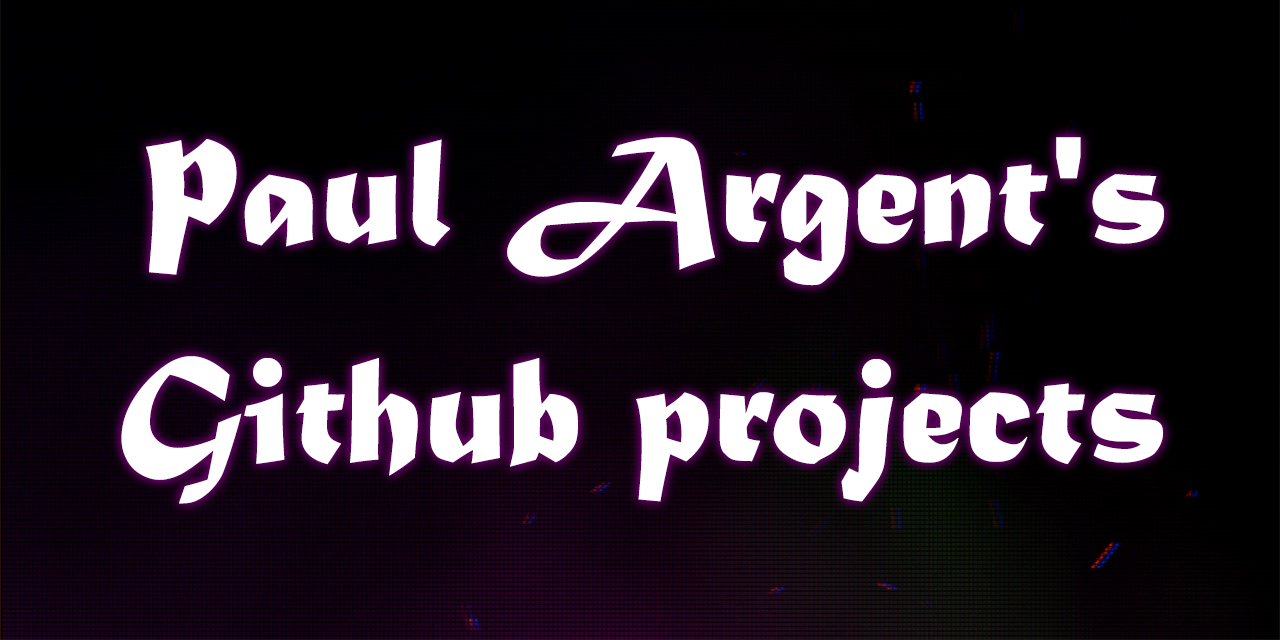
<style>
.page{position:relative;width:1280px;height:640px;background:#000000}
.page>*{position:absolute;margin:0}
.t1{font:160px "MaturaMTScriptCapitals";color:#ffffff}
.t2{font:200px "MaturaMTScriptCapitals";color:#ffffff}
</style>
<div class="page">
<p class="t1" style="left:244px;top:137px;width:920px;height:149px">aul Argent's</p>
<p class="t2" style="left:146px;top:139px;width:91px;height:136px">p</p>
<p class="t1" style="left:121px;top:356px;width:1042px;height:148px">Github projects</p>
</div>
